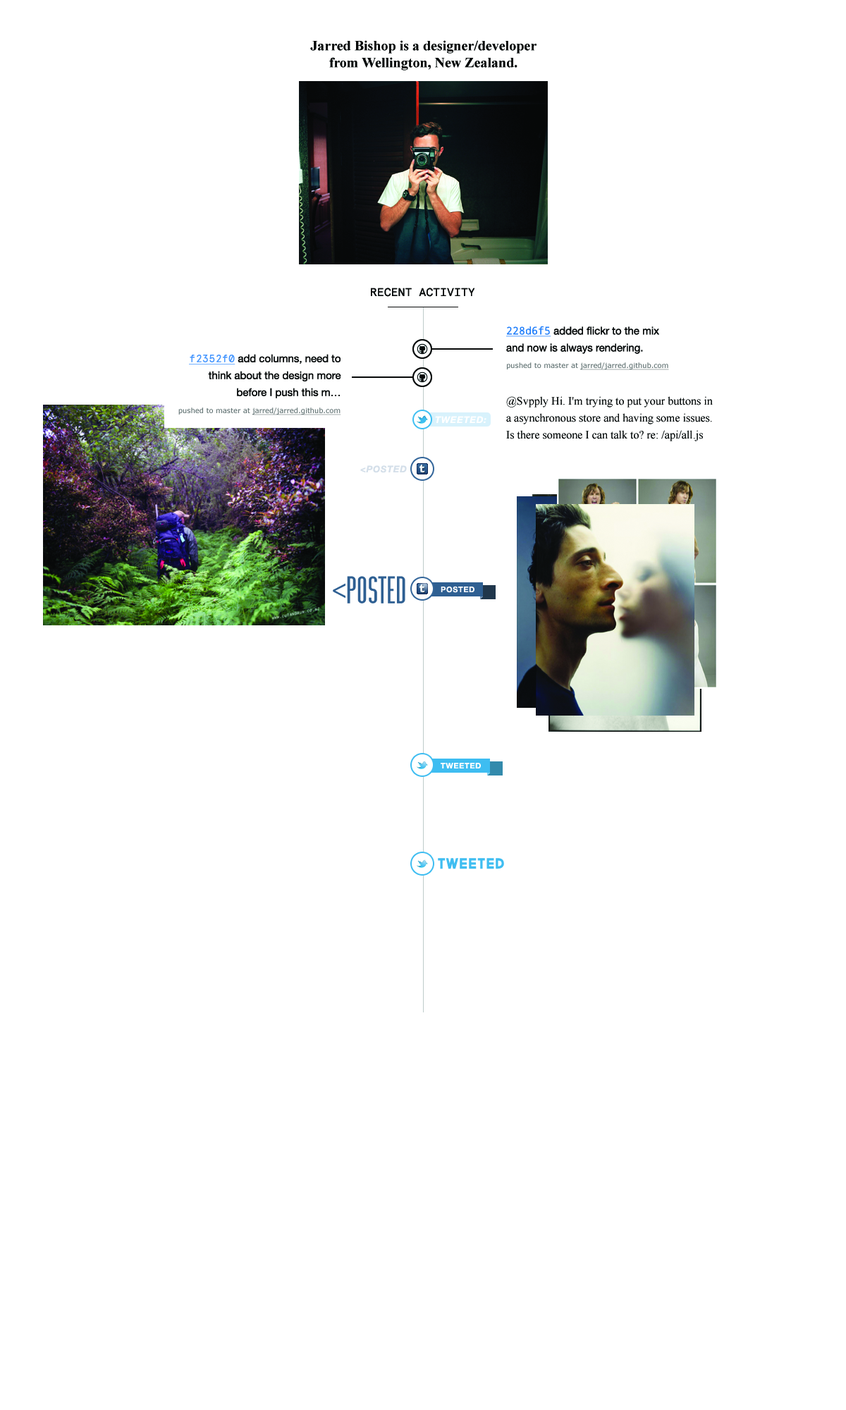
<style>
.page{position:relative;width:846px;height:1410px;background:#ffffff}
.page>*{position:absolute;margin:0}
.t1{font:14.1px/16.9px "TimesNewRomanPS-BoldMT";color:#060808}
.t2{font:11.3px "Apercu-Mono";color:#060808}
.t3{font:10.6px/16.9px "HelveticaNeue";color:#060808}
.t4{font:10.6px/16.9px "DroidSansMono";color:#207efb;text-decoration:underline}
.t5{font:10.6px/16.9px "Apercu-Mono";color:#4395ff;text-decoration:underline}
.t6{font:7px "Verdana";color:#586a6b;text-decoration:underline}
.t7{font:7px "Verdana";color:#586a6b}
.t8{font:11.3px/16.9px "TimesNewRomanPSMT";color:#070809}
.t9{font:9.2px "HelveticaNeue-BoldItalic";letter-spacing:0.06em;color:#ffffff}
.t10{font:9.2px "HelveticaNeue-BoldItalic";letter-spacing:0.06em;color:#d4dfe9}
.t11{font:26.8px "Innercity-tendollarfonts.com";letter-spacing:-0.069em;color:#2e5f92}
.t12{font:26.8px "MyriadPro-Regular";letter-spacing:-0.069em;color:#2e5f92}
.t13{font:7.8px "HelveticaNeue-Bold";letter-spacing:0.06em;color:#ffffff}
.t14{font:14.1px "Governor";color:#3ebdf1}
</style>
<div class="page">
<p class="t1" style="left:310px;top:40px;width:226px;height:30px;text-align:center">Jarred Bishop is a designer/developer from Wellington, New Zealand.</p>
<p class="t2" style="left:371px;top:288px;width:104px;height:9px">RECENT ACTIVITY</p>
<p class="t3" style="left:506px;top:326px;width:153px;height:28px"><span class="t4">228d6f5</span> added flickr to the mix and now is always rendering.</p>
<p class="t3" style="left:189px;top:354px;width:152px;height:44px;text-align:right"><span class="t5">f2352f0</span> add columns, need to think about the design more before I push this m…</p>
<p class="t6" style="left:507px;top:362px;width:162px;height:8px"><span class="t7">pushed to master at </span>jarred/jarred.github.com</p>
<p class="t8" style="left:506px;top:396px;width:207px;height:45px">@Svpply Hi. I'm trying to put your buttons in a asynchronous store and having some issues. Is there someone I can talk to? re: /api/all.js</p>
<p class="t6" style="left:178px;top:407px;width:163px;height:8px"><span class="t7">pushed to master at </span>jarred/jarred.github.com</p>
<p class="t9" style="left:435px;top:416px;width:51px;height:7px">TWEETED:</p>
<p class="t10" style="left:360px;top:465px;width:47px;height:8px">&lt;POSTED</p>
<p class="t11" style="left:333px;top:576px;width:72px;height:27px"><span class="t12">&lt;</span>POSTED</p>
<p class="t13" style="left:441px;top:586px;width:33px;height:7px">POSTED</p>
<p class="t13" style="left:441px;top:763px;width:40px;height:5px">TWEETED</p>
<p class="t14" style="left:438px;top:858px;width:66px;height:11px">TWEETED</p>
</div>
